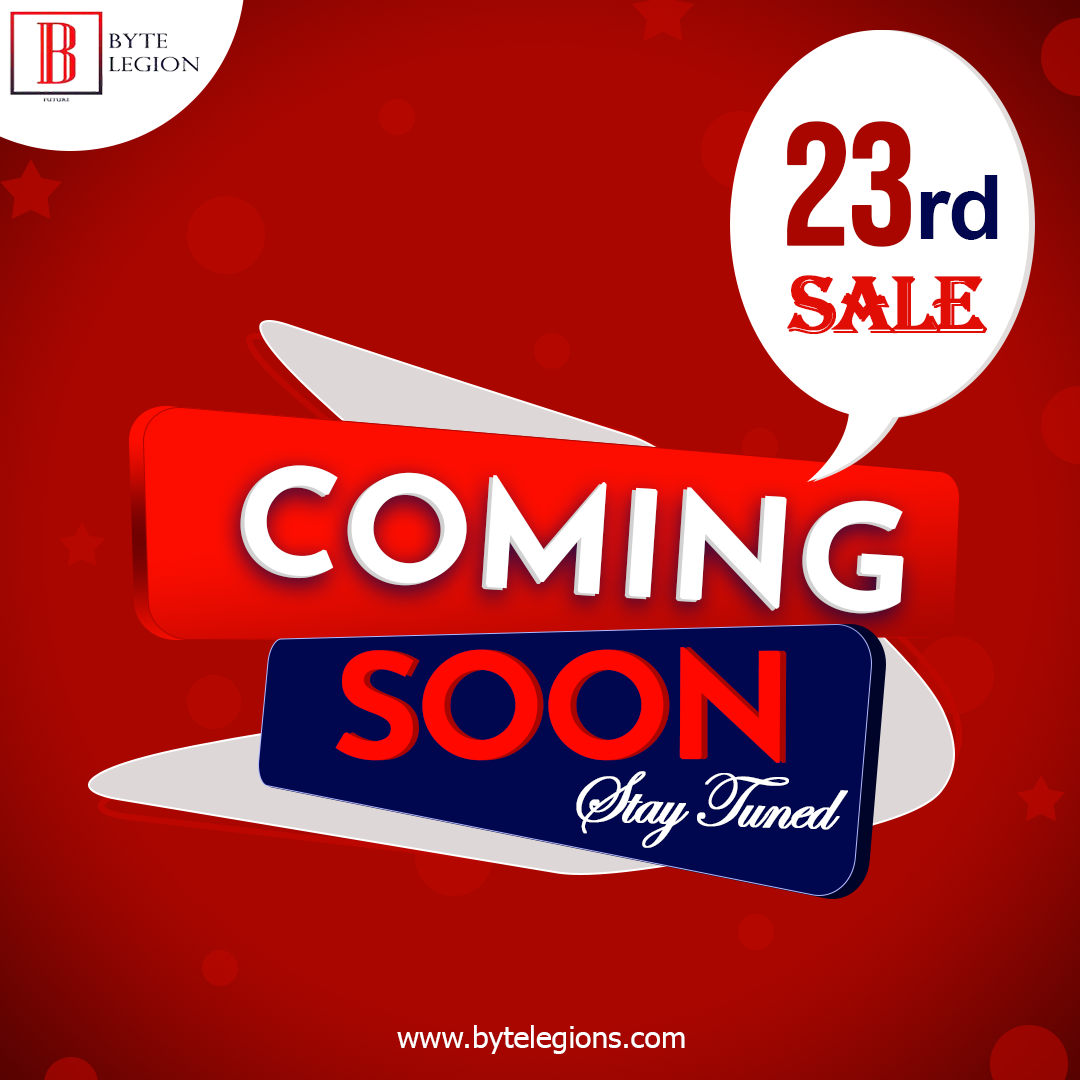
<style>
.page{position:relative;width:1080px;height:1080px;background:#a90600}
.page>*{position:absolute;margin:0}
.t1{font:174px "BebasNeue-Regular";letter-spacing:-0.05em;color:#a90600;font-weight:bold}
.t2{font:89.1px "Arial-BoldMT";letter-spacing:-0.02em;color:#01074e}
.t3{font:83.8px "Algerian";letter-spacing:-0.075em;color:#e00e04;text-transform:uppercase;font-weight:bold}
.t4{font:143px "JosefinSans-SemiBold";color:#ffffff;text-transform:uppercase;font-weight:bold;scale:1.04 1}
.t5{font:143px "JosefinSans-SemiBold";letter-spacing:-0.04em;color:#ff0800;text-transform:uppercase;font-weight:bold;scale:1.04 1}
.t6{font:76.4px "EdwardianScriptITC";letter-spacing:-0.04em;color:#ffffff;font-weight:bold}
.t7{font:30px "Tahoma";color:#ffffff}
</style>
<div class="page">
<p class="t1" style="left:787px;top:121px;width:124px;height:126px">23</p>
<p class="t2" style="left:920px;top:175px;width:78px;height:65px">rd</p>
<p class="t3" style="left:787px;top:275px;width:200px;height:59px">Sale</p>
<p class="t4" style="left:240px;top:467px;width:660px;height:147px;rotate:4deg">Coming</p>
<p class="t4" style="left:244px;top:465px;width:660px;height:147px;rotate:4deg">Coming</p>
<p class="t5" style="left:335px;top:647px;width:446px;height:116px">Soon</p>
<p class="t5" style="left:341px;top:647px;width:446px;height:116px">Soon</p>
<p class="t6" style="left:576px;top:771px;width:272px;height:77px;rotate:2deg">Stay Tuned</p>
<p class="t7" style="left:397px;top:1025px;width:288px;height:29px">www.bytelegions.com</p>
</div>
